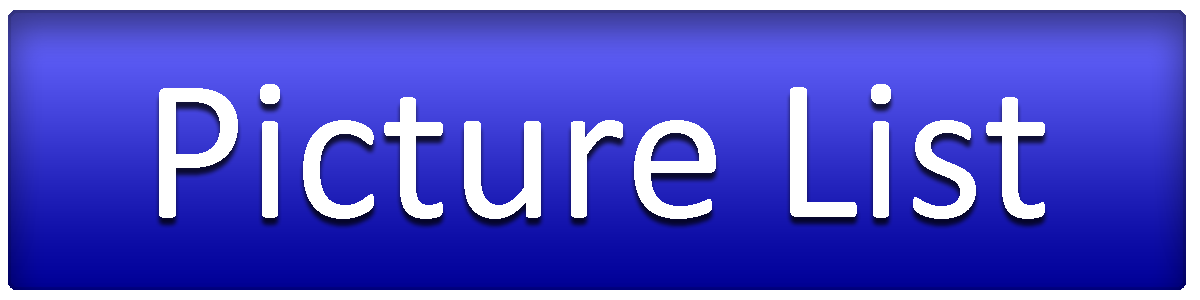
<style>
.page{position:relative;width:1200px;height:300px}
.page>*{position:absolute;margin:0}
.t1{font:204.2px "Calibri";color:#ffffff}
</style>
<div class="page">
<p class="t1" style="left:159px;top:84px;width:886px;height:135px">Picture List</p>
</div>
